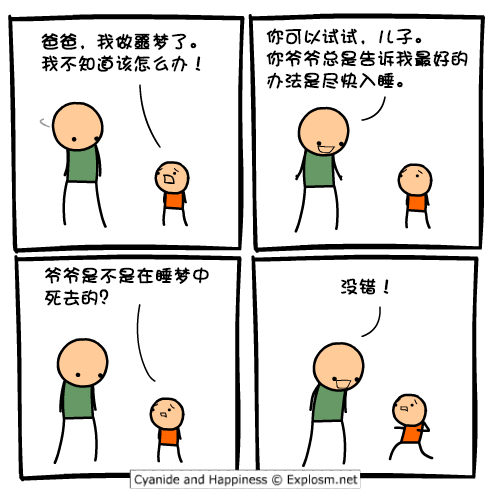
<style>
.page{position:relative;width:500px;height:500px;background:#ffffff}
.page>*{position:absolute;margin:0}
.t1{font:18px/22px "DFShaoNvW5";color:#000000;font-weight:bold}
.t2{font:18px "DFShaoNvW5";color:#000000;font-weight:bold}
</style>
<div class="page">
<p class="t1" style="left:266px;top:28px;width:202px;height:61px">你可以试试，儿子。<br>你爷爷总是告诉我最好的<br>办法是尽快入睡。</p>
<p class="t1" style="left:41px;top:33px;width:160px;height:39px">爸爸，我做噩梦了。<br>我不知道该怎么办！</p>
<p class="t1" style="left:45px;top:267px;width:164px;height:39px">爷爷是不是在睡梦中<br>死去的？</p>
<p class="t2" style="left:341px;top:278px;width:48px;height:17px">没错！</p>
</div>
